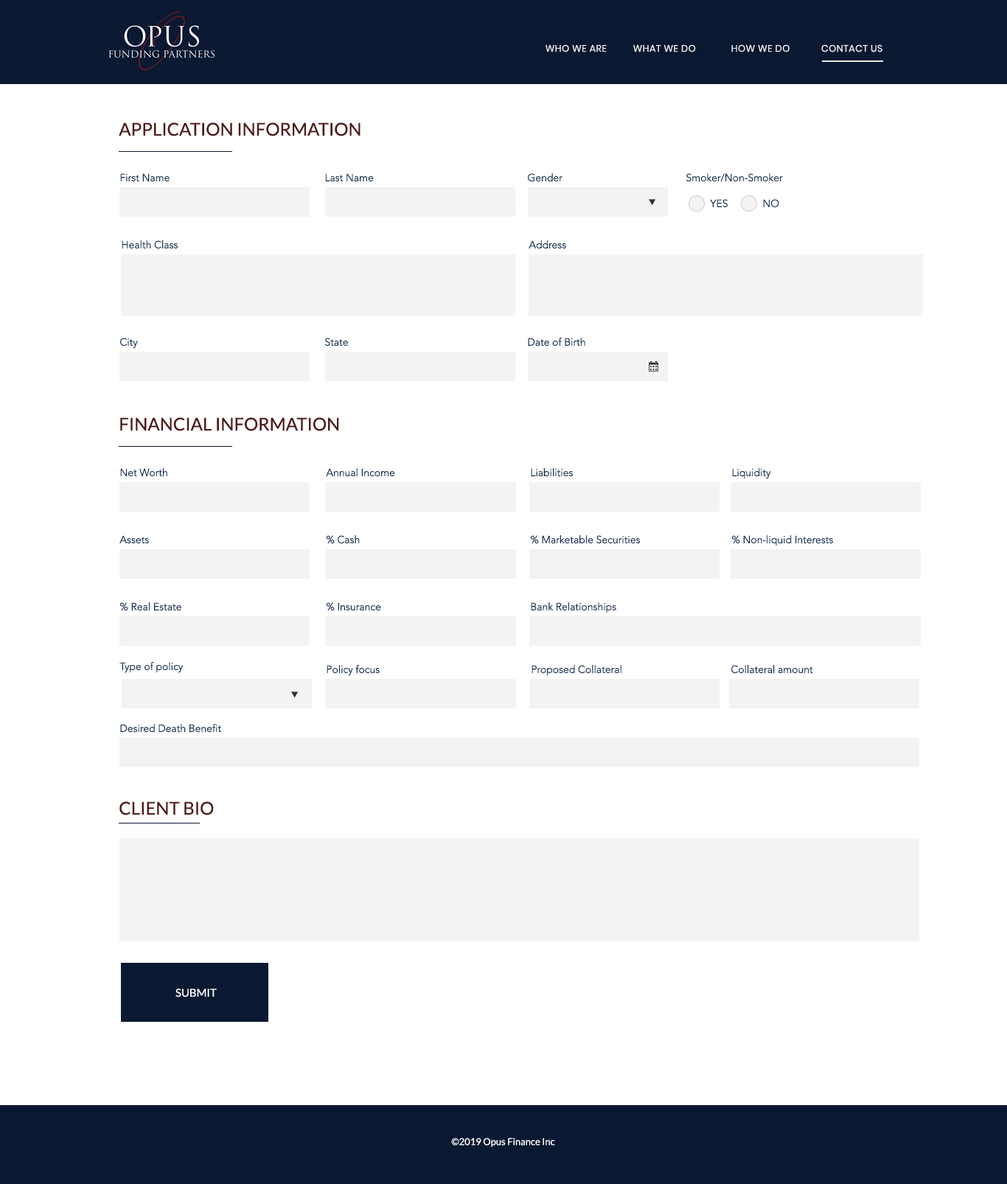
<style>
.page{position:relative;width:1007px;height:1184px;background:#ffffff}
.page>*{position:absolute;margin:0}
.t1{font:9.6px "Poppins-Regular";letter-spacing:0.025em;color:#e9e9e9}
.t2{font:17.7px "Lato-Regular";color:#4e1b1a}
.t3{font:10.3px/29.5px "Avenir-Light"}
.t4{font:10.3px "Avenir-Light";color:#0c2a4d}
.t5{font:11.1px "Lato-Regular";color:#ffffff}
.t6{font:9.6px "Lato-Regular";color:#ffffff}
</style>
<div class="page">
<p class="t1" style="left:546px;top:44px;width:336px;height:8px">WHO WE ARE    WHAT WE DO  HOW WE DO     CONTACT US</p>
<p class="t2" style="left:119px;top:122px;width:242px;height:14px">APPLICATION INFORMATION</p>
<p class="t3" style="left:120px;top:173px;width:50px;height:38px">First Name<br>Last Name</p>
<p class="t4" style="left:325px;top:173px;width:49px;height:8px">Last Name</p>
<p class="t4" style="left:528px;top:173px;width:35px;height:9px">Gender</p>
<p class="t4" style="left:686px;top:173px;width:97px;height:9px">Smoker/Non-Smoker</p>
<p class="t4" style="left:710px;top:199px;width:18px;height:9px">YES</p>
<p class="t4" style="left:763px;top:199px;width:16px;height:9px">NO</p>
<p class="t4" style="left:122px;top:240px;width:56px;height:9px">Health Class</p>
<p class="t4" style="left:529px;top:240px;width:37px;height:8px">Address</p>
<p class="t4" style="left:120px;top:338px;width:18px;height:11px">City</p>
<p class="t4" style="left:325px;top:338px;width:23px;height:9px">State</p>
<p class="t4" style="left:528px;top:338px;width:57px;height:8px">Date of Birth</p>
<p class="t2" style="left:120px;top:417px;width:219px;height:14px">FINANCIAL INFORMATION</p>
<p class="t4" style="left:120px;top:468px;width:47px;height:8px">Net Worth</p>
<p class="t4" style="left:326px;top:468px;width:69px;height:8px">Annual Income</p>
<p class="t4" style="left:531px;top:468px;width:42px;height:8px">Liabilities</p>
<p class="t4" style="left:732px;top:468px;width:39px;height:11px">Liquidity</p>
<p class="t4" style="left:119px;top:535px;width:30px;height:8px">Assets</p>
<p class="t4" style="left:326px;top:535px;width:34px;height:9px">% Cash</p>
<p class="t4" style="left:530px;top:535px;width:110px;height:9px">% Marketable Securities</p>
<p class="t4" style="left:731px;top:535px;width:102px;height:11px">% Non-liquid Interests</p>
<p class="t4" style="left:119px;top:602px;width:62px;height:9px">% Real Estate</p>
<p class="t4" style="left:326px;top:602px;width:55px;height:9px">% Insurance</p>
<p class="t4" style="left:531px;top:602px;width:85px;height:11px">Bank Relationships</p>
<p class="t4" style="left:119px;top:662px;width:65px;height:11px">Type of policy</p>
<p class="t4" style="left:327px;top:665px;width:53px;height:11px">Policy focus</p>
<p class="t4" style="left:532px;top:665px;width:90px;height:10px">Proposed Collateral</p>
<p class="t4" style="left:731px;top:665px;width:82px;height:9px">Collateral amount</p>
<p class="t4" style="left:120px;top:724px;width:101px;height:8px">Desired Death Benefit</p>
<p class="t2" style="left:119px;top:801px;width:95px;height:14px">CLIENT BIO</p>
<p class="t5" style="left:175px;top:989px;width:42px;height:9px">SUBMIT</p>
<p class="t6" style="left:451px;top:1138px;width:104px;height:9px">©2019 Opus Finance Inc</p>
</div>
